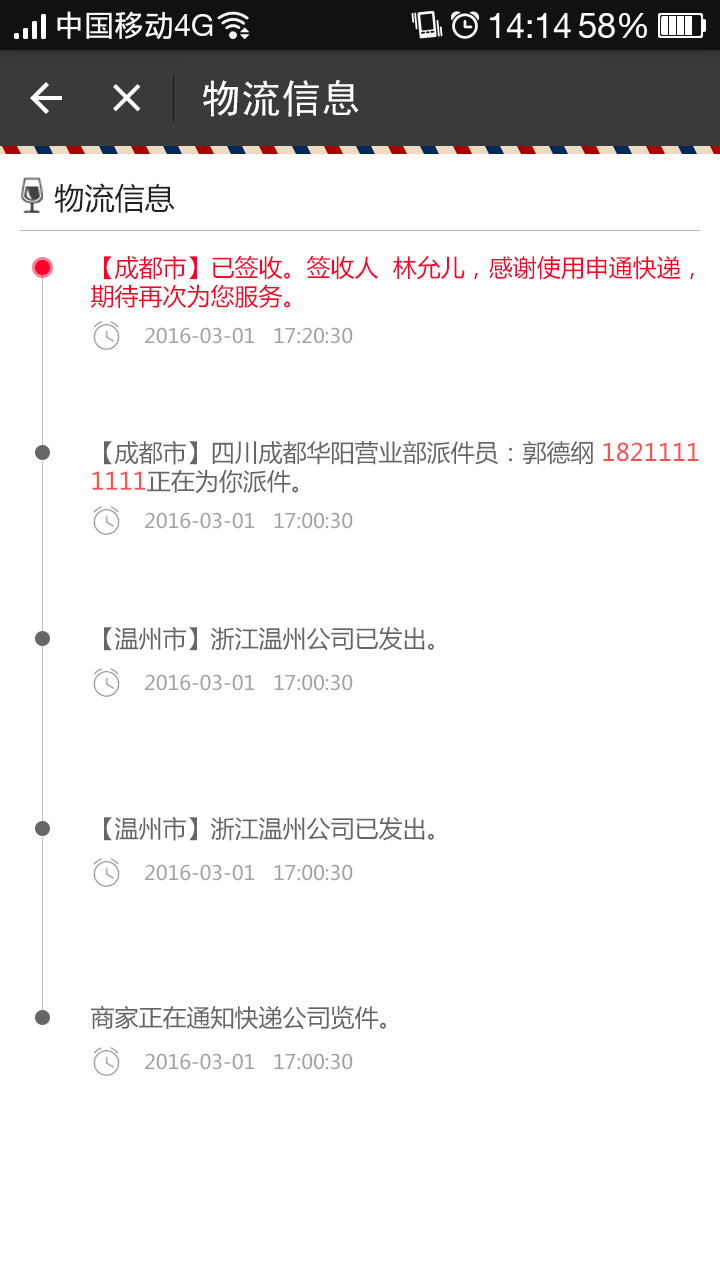
<style>
.page{position:relative;width:720px;height:1280px;background:#ffffff}
.page>*{position:absolute;margin:0}
.t1{font:40px "SimHei";color:#ffffff}
.t2{font:30px "MicrosoftYaHei";color:#242120}
.t3{font:24px "MicrosoftYaHei";color:#ff0029}
.t4{font:20px "MicrosoftYaHei";color:#a2a2a2}
.t5{font:24px "MicrosoftYaHei";color:#666666}
.t6{font:24px "MicrosoftYaHei";color:#fe5050}
</style>
<div class="page">
<p class="t1" style="left:203px;top:79px;width:156px;height:38px">物流信息</p>
<p class="t2" style="left:54px;top:183px;width:121px;height:30px">物流信息</p>
<p class="t3" style="left:91px;top:255px;width:603px;height:54px">【成都市】已签收。签收人  林允儿，感谢使用申通快递，<br>期待再次为您服务。</p>
<p class="t4" style="left:145px;top:327px;width:208px;height:17px">2016-03-01   17:20:30</p>
<p class="t5" style="left:92px;top:440px;width:607px;height:54px">【成都市】四川成都华阳营业部派件员：郭德纲 <span class="t6">1821111<br>1111</span>正在为你派件。</p>
<p class="t4" style="left:145px;top:512px;width:208px;height:17px">2016-03-01   17:00:30</p>
<p class="t5" style="left:104px;top:626px;width:330px;height:25px">【温州市】浙江温州公司已发出。</p>
<p class="t4" style="left:145px;top:674px;width:208px;height:17px">2016-03-01   17:00:30</p>
<p class="t5" style="left:104px;top:816px;width:330px;height:25px">【温州市】浙江温州公司已发出。</p>
<p class="t4" style="left:145px;top:864px;width:208px;height:17px">2016-03-01   17:00:30</p>
<p class="t5" style="left:91px;top:1005px;width:295px;height:25px">商家正在通知快递公司览件。</p>
<p class="t4" style="left:145px;top:1053px;width:208px;height:17px">2016-03-01   17:00:30</p>
</div>
